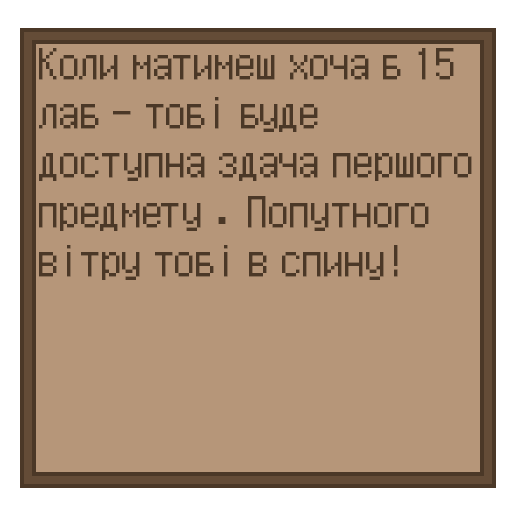
<style>
.page{position:relative;width:512px;height:512px;background:#b69679}
.page>*{position:absolute;margin:0}
.t1{font:41px "XENOA";color:#4b3827}
</style>
<div class="page">
<p class="t1" style="left:39px;top:48px;width:433px;height:232px">Коли матимеш хоча б 15<br>лаб - тобі буде <br>доступна здача першого предмету . Попутного вітру тобі в спину!</p>
</div>
